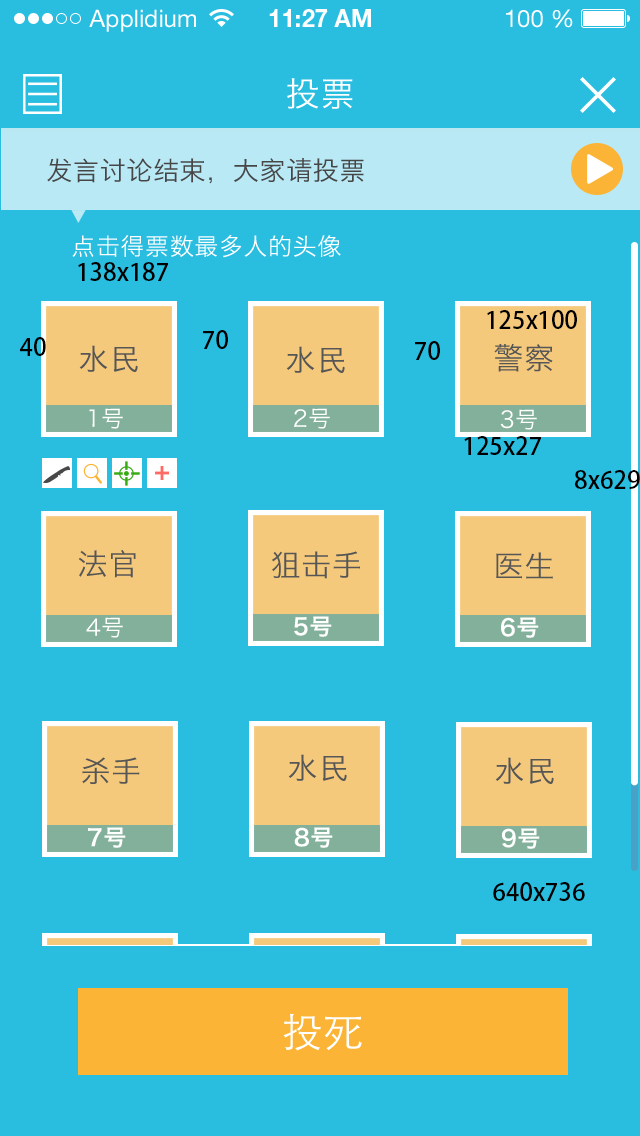
<style>
.page{position:relative;width:640px;height:1136px;background:#29bde0}
.page>*{position:absolute;margin:0}
.t1{font:34px "HiraginoSansGB-W3";letter-spacing:0.025em;color:#ffffff}
.t2{font:26px "HiraginoSansGB-W3";letter-spacing:0.025em;color:#464646}
.t3{font:24px "HiraginoSansGB-W3";letter-spacing:0.025em;color:#ffffff}
.t4{font:24px "AdobeHeitiStd-Regular";color:#000000}
.t5{font:30px "HiraginoSansGB-W3";letter-spacing:0.025em;color:#565656}
.t6{font:22.8px "HiraginoSansGB-W3";letter-spacing:0.025em;color:#ffffff}
.t7{font:22.8px "HiraginoSansGB-W6";letter-spacing:0.025em;color:#ffffff}
.t8{font:40px "STHeitiSC-Light";letter-spacing:0.025em;color:#ffffff}
</style>
<div class="page">
<p class="t1" style="left:287px;top:78px;width:66px;height:31px">投票</p>
<p class="t2" style="left:47px;top:158px;width:317px;height:26px">发言讨论结束，大家请投票</p>
<p class="t3" style="left:72px;top:234px;width:269px;height:24px">点击得票数最多人的头像</p>
<p class="t4" style="left:78px;top:262px;width:90px;height:19px">138x187</p>
<p class="t4" style="left:487px;top:310px;width:90px;height:19px">125x100</p>
<p class="t4" style="left:20px;top:337px;width:26px;height:19px">40</p>
<p class="t4" style="left:203px;top:330px;width:25px;height:19px">70</p>
<p class="t4" style="left:415px;top:341px;width:25px;height:19px">70</p>
<p class="t5" style="left:79px;top:345px;width:59px;height:27px">水民</p>
<p class="t5" style="left:286px;top:346px;width:59px;height:27px">水民</p>
<p class="t5" style="left:494px;top:343px;width:59px;height:29px">警察</p>
<p class="t6" style="left:89px;top:408px;width:34px;height:21px">1号</p>
<p class="t6" style="left:294px;top:408px;width:36px;height:21px">2号</p>
<p class="t6" style="left:500px;top:409px;width:37px;height:21px">3号</p>
<p class="t4" style="left:464px;top:436px;width:77px;height:19px">125x27</p>
<p class="t4" style="left:575px;top:470px;width:65px;height:19px">8x629</p>
<p class="t5" style="left:78px;top:550px;width:58px;height:28px">法官</p>
<p class="t5" style="left:272px;top:551px;width:88px;height:28px">狙击手</p>
<p class="t5" style="left:496px;top:552px;width:57px;height:27px">医生</p>
<p class="t6" style="left:86px;top:617px;width:37px;height:21px">4号</p>
<p class="t7" style="left:294px;top:616px;width:38px;height:21px">5号</p>
<p class="t7" style="left:501px;top:617px;width:38px;height:21px">6号</p>
<p class="t5" style="left:82px;top:757px;width:58px;height:27px">杀手</p>
<p class="t5" style="left:288px;top:754px;width:59px;height:27px">水民</p>
<p class="t5" style="left:495px;top:757px;width:59px;height:27px">水民</p>
<p class="t7" style="left:88px;top:827px;width:38px;height:21px">7号</p>
<p class="t7" style="left:294px;top:827px;width:39px;height:21px">8号</p>
<p class="t7" style="left:501px;top:828px;width:39px;height:21px">9号</p>
<p class="t4" style="left:493px;top:882px;width:92px;height:19px">640x736</p>
<p class="t8" style="left:283px;top:1013px;width:79px;height:38px">投死</p>
</div>
